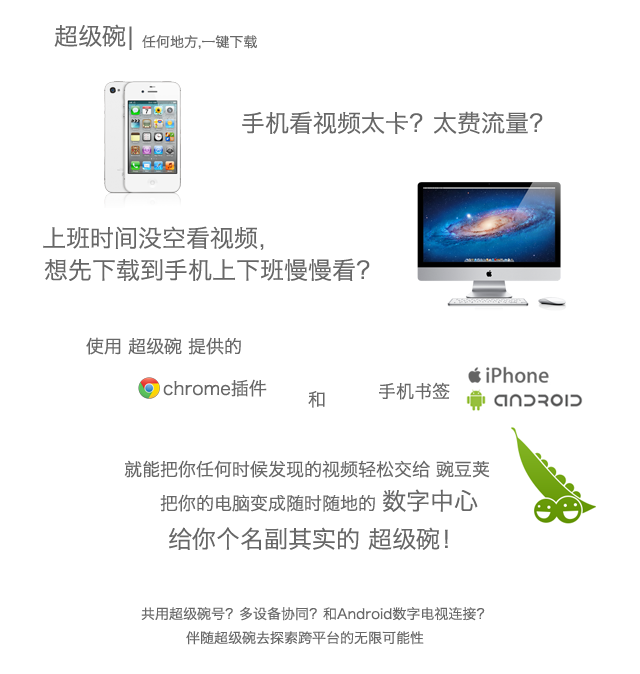
<style>
.page{position:relative;width:640px;height:674px;background:#ffffff}
.page>*{position:absolute;margin:0}
.t1{font:24px "HiraginoSansGB-W3";color:#676767}
.t2{font:14px "HiraginoSansGB-W3";color:#676767}
.t3{font:18px "HiraginoSansGB-W3";color:#676767}
</style>
<div class="page">
<p class="t1" style="left:54px;top:24px;width:78px;height:26px">超级碗|</p>
<p class="t2" style="left:142px;top:35px;width:115px;height:14px">任何地方,一键下载</p>
<p class="t1" style="left:242px;top:111px;width:301px;height:23px">手机看视频太卡？太费流量？</p>
<p class="t1" style="left:43px;top:226px;width:221px;height:24px">上班时间没空看视频，</p>
<p class="t1" style="left:44px;top:258px;width:326px;height:23px">想先下载到手机上下班慢慢看？</p>
<p class="t3" style="left:86px;top:337px;width:155px;height:18px">使用 超级碗 提供的</p>
<p class="t3" style="left:163px;top:379px;width:104px;height:18px">chrome插件</p>
<p class="t3" style="left:379px;top:382px;width:71px;height:18px">手机书签</p>
<p class="t3" style="left:308px;top:391px;width:17px;height:17px">和</p>
<p class="t3" style="left:124px;top:460px;width:366px;height:18px">就能把你任何时候发现的视频轻松交给 豌豆荚</p>
<p class="t3" style="left:160px;top:489px;width:318px;height:23px">把你的电脑变成随时随地的 <span class="t1">数字中心</span></p>
<p class="t1" style="left:169px;top:527px;width:279px;height:23px">给你个名副其实的 超级碗！</p>
<p class="t2" style="left:141px;top:607px;width:344px;height:14px">共用超级碗号？多设备协同？和Android数字电视连接？</p>
<p class="t2" style="left:186px;top:631px;width:238px;height:14px">伴随超级碗去探索跨平台的无限可能性</p>
</div>
